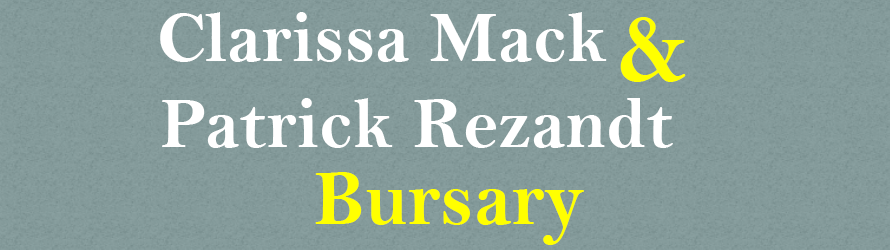
<style>
.page{position:relative;width:890px;height:250px}
.page>*{position:absolute;margin:0}
.t1{font:73px "BellMTBold";color:#ffffff}
.t2{font:97px "BellMTBold";color:#ffff00}
.t3{font:80px "BellMTBold";color:#ffff00}
</style>
<div class="page">
<p class="t1" style="left:160px;top:12px;width:447px;height:50px">Clarissa Mack</p>
<p class="t2" style="left:620px;top:17px;width:66px;height:65px">&amp;</p>
<p class="t1" style="left:162px;top:98px;width:511px;height:50px">Patrick Rezandt</p>
<p class="t3" style="left:315px;top:172px;width:269px;height:73px">Bursary</p>
</div>
